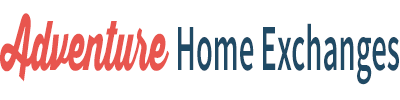
<style>
.page{position:relative;width:400px;height:100px;background:#ffffff}
.page>*{position:absolute;margin:0}
.t1{font:65.7px "SourceSansPro-Semibold";color:#204a65;scale:0.47 1}
.t2{font:68.3px "ThirstyScriptBlack";color:#e8554e;scale:0.47 1}
</style>
<div class="page">
<p class="t1" style="left:0px;top:13px;width:399px;height:72px"><span class="t2">Adventure </span>Home Exchanges</p>
</div>
